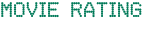
<style>
.page{position:relative;width:145px;height:50px;background:#ffffff}
.page>*{position:absolute;margin:0}
.t1{font:17px "1979-Dot-Matrix";color:#007958}
</style>
<div class="page">
<p class="t1" style="left:1px;top:2px;width:141px;height:16px">Movie rating</p>
</div>
